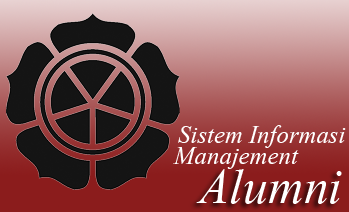
<style>
.page{position:relative;width:349px;height:212px}
.page>*{position:absolute;margin:0}
.t1{font:32px "Kokila-Italic";color:#ffffff}
.t2{font:64px "Kokila-Italic";color:#ffffff}
</style>
<div class="page">
<p class="t1" style="left:178px;top:125px;width:168px;height:23px">Sistem Informasi</p>
<p class="t1" style="left:173px;top:147px;width:126px;height:22px">Manajement</p>
<p class="t2" style="left:196px;top:169px;width:146px;height:35px">Alumni</p>
</div>
